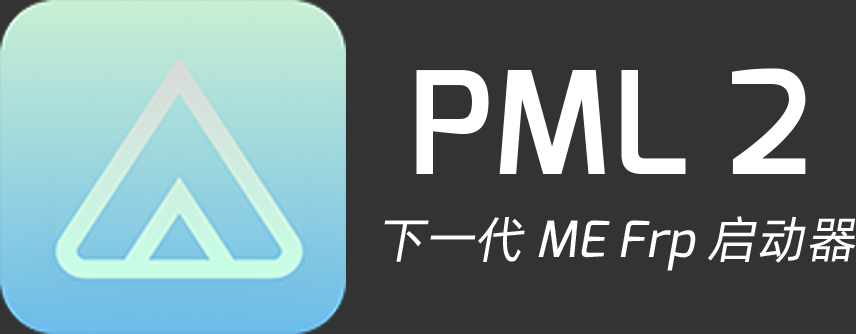
<style>
.page{position:relative;width:856px;height:334px;background:#333333}
.page>*{position:absolute;margin:0}
.t1{font:142.6px "Exo-DemiBold";color:#ffffff}
.t2{font:50px "Exo-Medium";color:#ffffff;font-style:italic}
.t3{font:50px "AlibabaPuHuiTi_3_55_Regular";color:#ffffff;font-style:italic}
</style>
<div class="page">
<p class="t1" style="left:416px;top:68px;width:390px;height:106px">PML 2</p>
<p class="t2" style="left:384px;top:216px;width:472px;height:55px"><span class="t3">下一代 </span>ME Frp <span class="t3">启动器</span></p>
</div>
